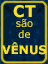
<style>
.page{position:relative;width:48px;height:64px;background:#00223f}
.page>*{position:absolute;margin:0}
.t1{font:10px/10.7px "Verdana";color:#fde310}
.t2{font:16px/10.7px "Verdana-Bold";color:#fde310}
.t3{font:11.9px/16px "Verdana-Bold";color:#fde310}
</style>
<div class="page">
<p class="t1" style="left:2px;top:5px;width:45px;height:50px;text-align:center"><span class="t2">CT<br></span>são<br>de<br><span class="t3">VÊNUS</span></p>
</div>
